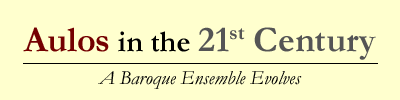
<style>
.page{position:relative;width:400px;height:100px;background:#ffffce}
.page>*{position:absolute;margin:0}
.t1{font:36px "Garamond-Bold";color:#555555}
.t2{font:36px "Garamond-Bold";color:#740000}
.t3{font:30px "Garamond-Bold";color:#000000}
.t4{font:20px "Garamond-Italic";color:#000000}
</style>
<div class="page">
<p class="t1" style="left:23px;top:27px;width:353px;height:33px"><span class="t2">Aulos</span><span class="t3"> in the </span>21st Century</p>
<p class="t4" style="left:98px;top:71px;width:204px;height:18px">A Baroque Ensemble Evolves</p>
</div>
